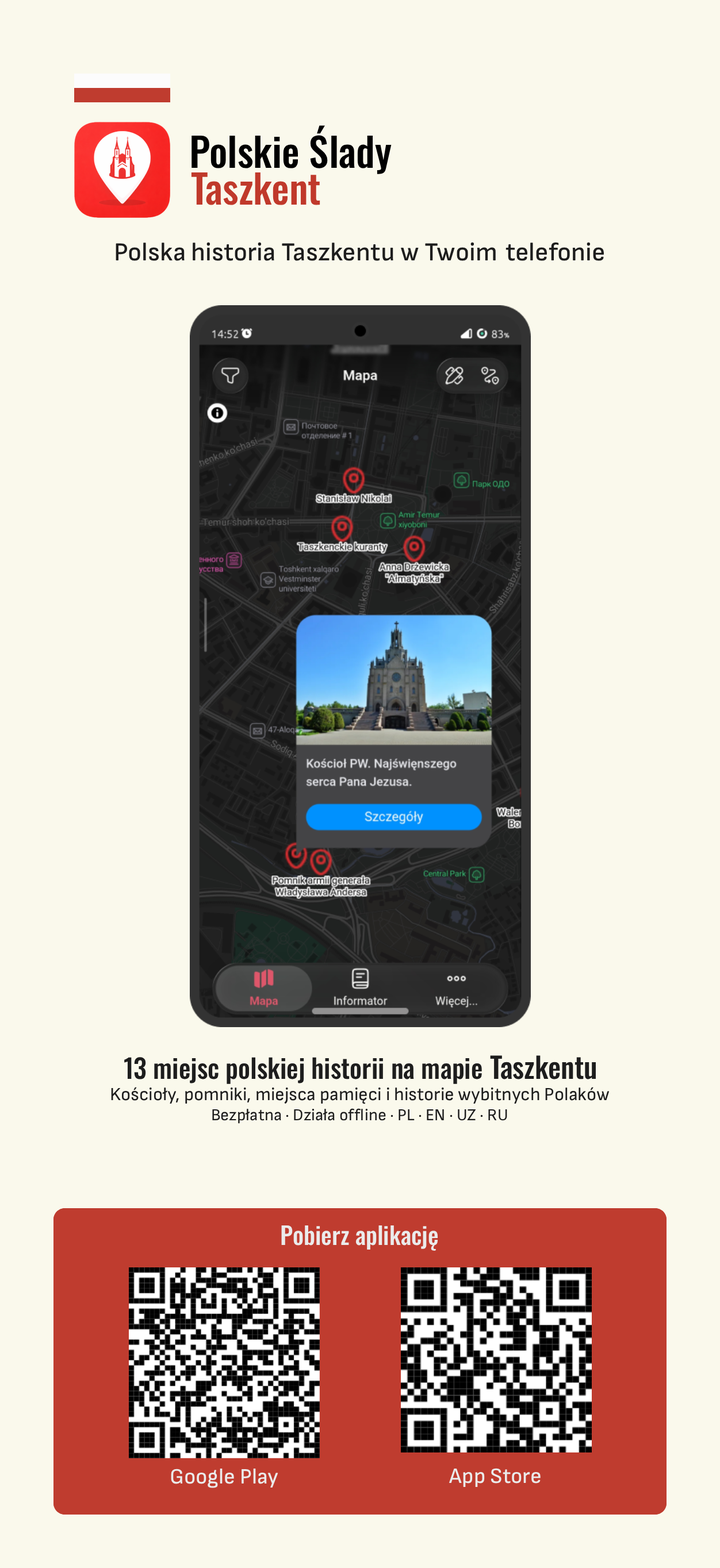
<style>
.page{position:relative;width:720px;height:1568px;background:#faf9ec}
.page>*{position:absolute;margin:0}
.t1{font:39.7px "Oswald-Medium";color:#000000}
.t2{font:39.7px "Oswald-Medium";color:#c0392b}
.t3{font:25.9px "SofiaSans-Medium";color:#1d1d1d}
.t4{font:26.4px "Oswald-Medium";color:#1d1d1d}
.t5{font:28.7px "Oswald-Medium";color:#1d1d1d}
.t6{font:18.4px "SofiaSans-Regular";color:#1d1d1d}
.t7{font:16.7px "SofiaSans-Regular";color:#1d1d1d}
.t8{font:24.1px "Oswald-Medium";color:#ebebeb}
.t9{font:21.8px "SofiaSans-Medium";color:#ebebeb}
</style>
<div class="page">
<p class="t1" style="left:191px;top:125px;width:200px;height:49px">Polskie Ślady</p>
<p class="t2" style="left:191px;top:172px;width:129px;height:33px">Taszkent</p>
<p class="t3" style="left:116px;top:242px;width:488px;height:19px">Polska historia Taszkentu w Twoim telefonie</p>
<p class="t4" style="left:124px;top:1055px;width:471px;height:29px">13 miejsc polskiej historii na mapie<span class="t5"> Taszkentu</span></p>
<p class="t6" style="left:111px;top:1087px;width:498px;height:17px">Kościoły, pomniki, miejsca pamięci i historie wybitnych Polaków</p>
<p class="t7" style="left:212px;top:1108px;width:295px;height:16px">Bezpłatna · Działa offline · PL · EN · UZ · RU</p>
<p class="t8" style="left:281px;top:1225px;width:157px;height:26px">Pobierz aplikację</p>
<p class="t9" style="left:171px;top:1469px;width:107px;height:19px">Google Play</p>
<p class="t9" style="left:448px;top:1468px;width:92px;height:20px">App Store</p>
</div>
